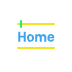
<style>
.page{position:relative;width:72px;height:72px;background:#ffffff}
.page>*{position:absolute;margin:0}
.t1{font:14.6px "FranklinGothic-Medium";color:#3da5ee}
</style>
<div class="page">
<p class="t1" style="left:18px;top:31px;width:37px;height:11px">Home</p>
</div>
